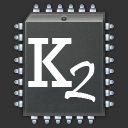
<style>
.page{position:relative;width:128px;height:128px;background:#333333}
.page>*{position:absolute;margin:0}
.t1{font:72px "Rockwell";color:#ffffff}
.t2{font:72px "Pristina-Regular";color:#ffffff}
</style>
<div class="page">
<p class="t1" style="left:28px;top:38px;width:44px;height:49px">K</p>
<p class="t2" style="left:64px;top:61px;width:32px;height:41px">2</p>
</div>
